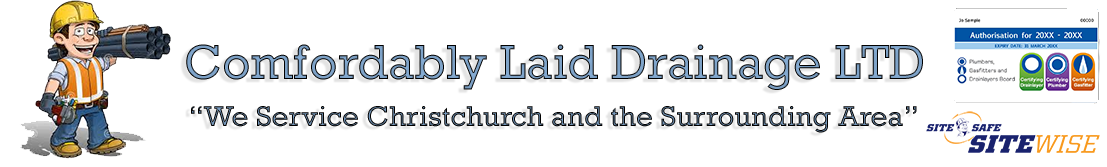
<style>
.page{position:relative;width:1107px;height:167px;background:#ffffff}
.page>*{position:absolute;margin:0}
.t1{font:50px "Rockwell"}
.t2{font:29.1px "Rockwell"}
</style>
<div class="page">
<p class="t1" style="left:186px;top:44px;width:737px;height:46px">Comfordably Laid Drainage LTD</p>
<p class="t2" style="left:191px;top:106px;width:726px;height:27px">“We Service Christchurch and the Surrounding Area”</p>
</div>
